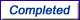
<style>
.page{position:relative;width:80px;height:20px;background:#ffffff}
.page>*{position:absolute;margin:0}
.t1{font:12px "ArialMT";color:#003399;font-weight:bold;font-style:italic}
</style>
<div class="page">
<p class="t1" style="left:9px;top:5px;width:62px;height:12px">Completed</p>
</div>
